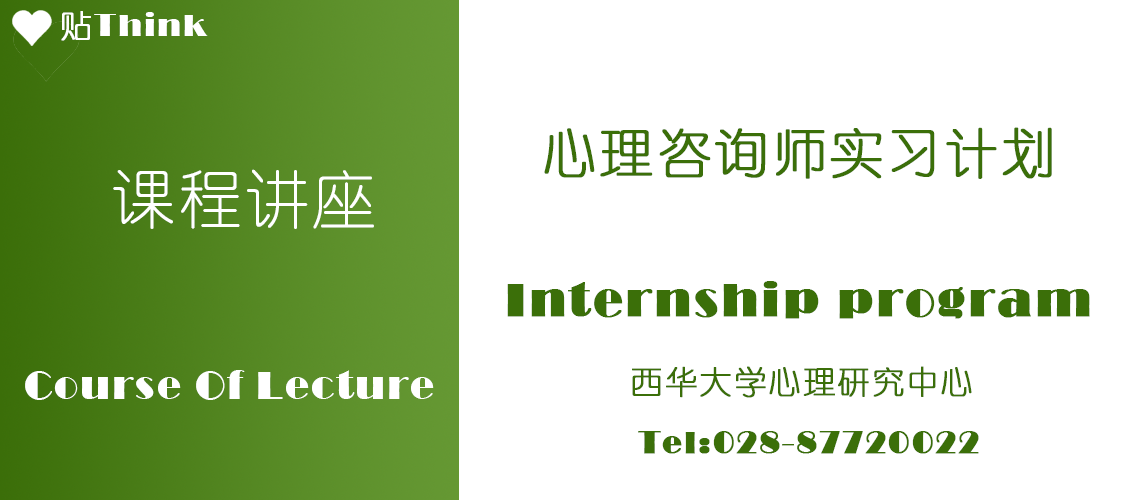
<style>
.page{position:relative;width:1140px;height:500px;background:#ffffff}
.page>*{position:absolute;margin:0}
.t1{font:32px "Broadway";letter-spacing:0.05em;color:#ffffff}
.t2{font:32px "YouYuan";letter-spacing:0.05em;color:#ffffff;font-weight:bold}
.t3{font:53.3px "YouYuan";letter-spacing:0.05em;color:#3b6f09;font-weight:bold}
.t4{font:64px "YouYuan";letter-spacing:0.05em;color:#ffffff}
.t5{font:48px "Broadway";letter-spacing:0.05em;color:#3b6f09;font-weight:bold}
.t6{font:32px "YouYuan";letter-spacing:0.05em;color:#3b6f09;font-weight:bold}
.t7{font:40px "Broadway";letter-spacing:0.05em;color:#ffffff}
.t8{font:32px "Broadway";letter-spacing:0.05em;color:#3b6f09;font-weight:bold}
</style>
<div class="page">
<p class="t1" style="left:61px;top:11px;width:147px;height:30px"><span class="t2"> 贴</span>Think</p>
<p class="t3" style="left:544px;top:127px;width:508px;height:52px">心理咨询师实习计划</p>
<p class="t4" style="left:113px;top:169px;width:261px;height:60px">课程讲座</p>
<p class="t5" style="left:507px;top:281px;width:583px;height:38px">Internship program</p>
<p class="t6" style="left:632px;top:366px;width:340px;height:32px">西华大学心理研究中心</p>
<p class="t7" style="left:25px;top:370px;width:409px;height:30px">Course Of Lecture</p>
<p class="t8" style="left:638px;top:431px;width:341px;height:23px">Tel:028-87720022</p>
</div>
